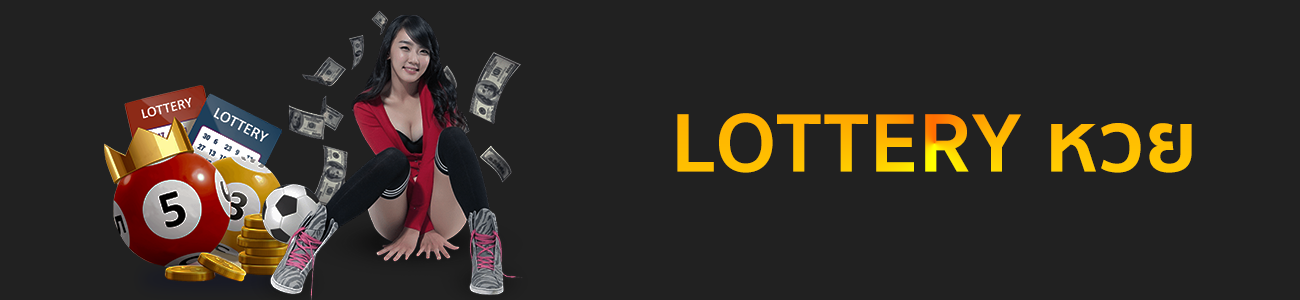
<style>
.page{position:relative;width:1300px;height:300px;background:#212121}
.page>*{position:absolute;margin:0}
.t1{font:84.7px "SukhumvitSet-Bold";letter-spacing:0.025em;color:#ffbc00}
</style>
<div class="page">
<p class="t1" style="left:677px;top:113px;width:515px;height:60px">LOTTERY หวย</p>
</div>
